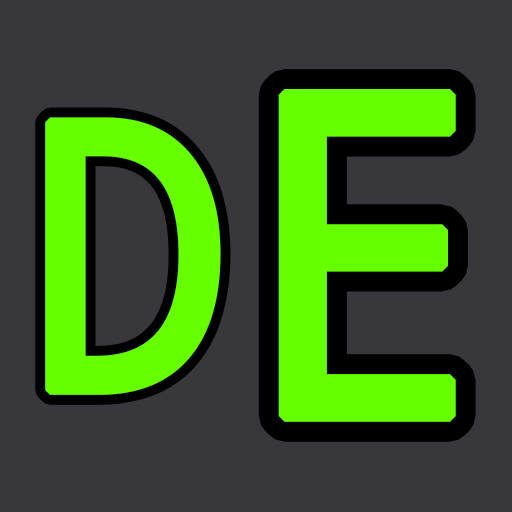
<style>
.page{position:relative;width:512px;height:512px;background:#38383c}
.page>*{position:absolute;margin:0}
.t1{font:450px "NotoMono";color:#66ff00;font-weight:bold;scale:0.89 1}
.t2{font:375px "NotoMono";color:#66ff00;font-weight:bold;scale:0.89 1}
</style>
<div class="page">
<p class="t1" style="left:278px;top:89px;width:178px;height:333px">E</p>
<p class="t2" style="left:45px;top:117px;width:176px;height:278px">D</p>
</div>
